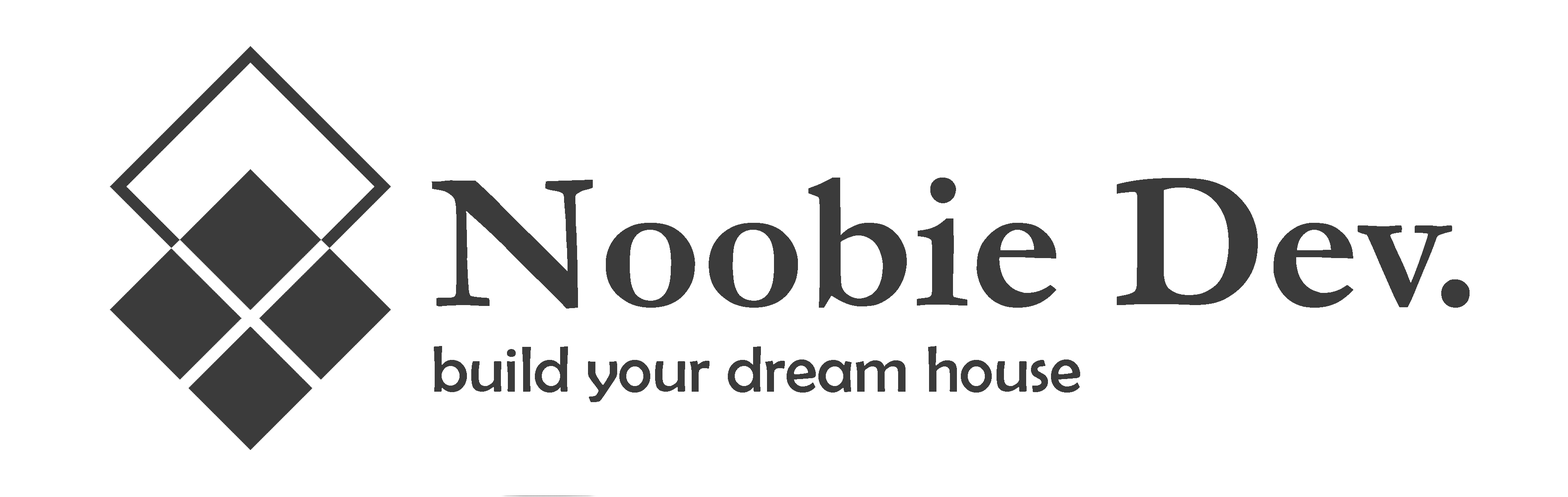
<style>
.page{position:relative;width:1568px;height:497px;background:#ffffff}
.page>*{position:absolute;margin:0}
.t1{font:197.8px "Garamond-Bold";color:#3b3b3b}
.t2{font:65.9px "BerlinSansFB-Reg";color:#3b3b3b}
</style>
<div class="page">
<p class="t1" style="left:432px;top:178px;width:1038px;height:131px">Noobie Dev.</p>
<p class="t2" style="left:434px;top:346px;width:646px;height:56px">build your dream house</p>
</div>
